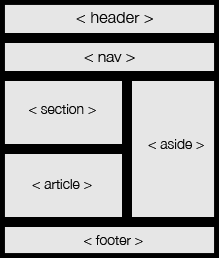
<style>
.page{position:relative;width:219px;height:258px;background:#e6e6e6}
.page>*{position:absolute;margin:0}
.t1{font:15.9px "HelveticaNeue-Light";color:#080808;scale:1.03 1}
.t2{font:15.1px "HelveticaNeue-Light";color:#080808;scale:1.03 1}
.t3{font:14px "HelveticaNeue-Light";color:#080808}
</style>
<div class="page">
<p class="t1" style="left:76px;top:12px;width:77px;height:11px">&lt; header &gt;</p>
<p class="t2" style="left:84px;top:54px;width:51px;height:8px">&lt; nav &gt;</p>
<p class="t3" style="left:29px;top:104px;width:67px;height:10px">&lt; section &gt;</p>
<p class="t3" style="left:148px;top:139px;width:56px;height:10px">&lt; aside &gt;</p>
<p class="t3" style="left:32px;top:179px;width:60px;height:10px">&lt; article &gt;</p>
<p class="t3" style="left:84px;top:235px;width:59px;height:10px">&lt; footer &gt;</p>
</div>
